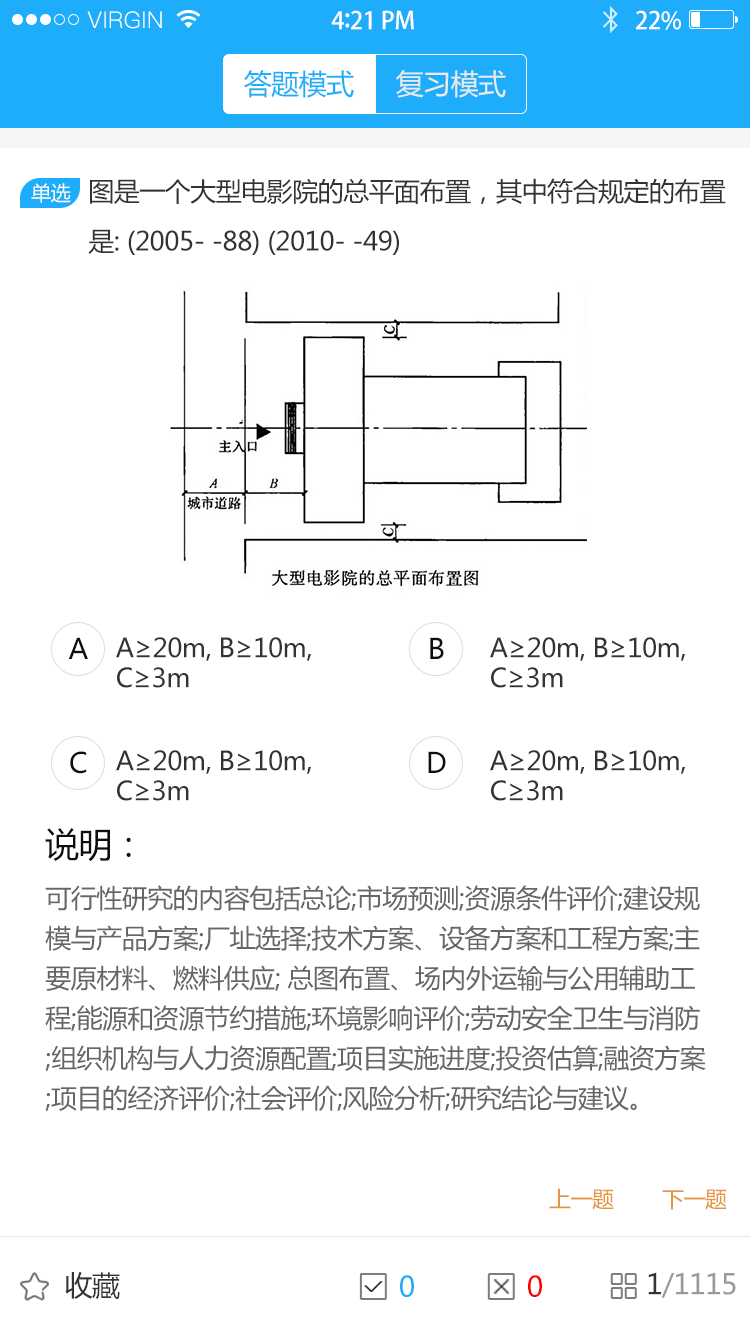
<style>
.page{position:relative;width:750px;height:1334px;background:#ffffff}
.page>*{position:absolute;margin:0}
.t1{font:23px "PingFang-SC-Regular";letter-spacing:0.02em;color:#ffffff}
.t2{font:24px "AdobeHeitiStd-Regular";letter-spacing:-0.02em;color:#ffffff}
.t3{font:26px "AdobeHeitiStd-Regular";letter-spacing:-0.02em;color:#ffffff}
.t4{font:28px "MicrosoftYaHei";letter-spacing:-0.02em;color:#1dadfa}
.t5{font:28px "MicrosoftYaHei";letter-spacing:-0.02em;color:#ebebeb}
.t6{font:20px "MicrosoftYaHei";letter-spacing:-0.02em;color:#fefefe}
.t7{font:26px/50px "MicrosoftYaHei";letter-spacing:-0.02em;color:#333333}
.t8{font:28px "MicrosoftYaHei";letter-spacing:-0.02em;color:#0e0e0e}
.t9{font:26px/30px "MicrosoftYaHei";letter-spacing:-0.02em;color:#333333}
.t10{font:34px "MicrosoftYaHei";letter-spacing:-0.02em;color:#0e0e0e}
.t11{font:26px/40px "MicrosoftYaHei";letter-spacing:-0.02em;color:#666666}
.t12{font:22px "MicrosoftYaHei";letter-spacing:-0.02em;color:#e6943e}
.t13{font:28px "MicrosoftYaHei";letter-spacing:-0.02em;color:#333333}
.t14{font:28px "MicrosoftYaHei";letter-spacing:-0.02em;color:#1dacf9}
.t15{font:28px "MicrosoftYaHei";letter-spacing:-0.02em;color:#ff0000}
.t16{font:28px "MicrosoftYaHei";letter-spacing:-0.02em;color:#999999}
</style>
<div class="page">
<p class="t1" style="left:87px;top:11px;width:75px;height:18px">VIRGIN</p>
<p class="t2" style="left:331px;top:10px;width:83px;height:20px">4<span class="t3">:</span>21 PM</p>
<p class="t2" style="left:636px;top:10px;width:45px;height:20px">22%</p>
<p class="t4" style="left:244px;top:70px;width:110px;height:28px">答题模式</p>
<p class="t5" style="left:396px;top:70px;width:110px;height:28px">复习模式</p>
<p class="t6" style="left:31px;top:183px;width:40px;height:20px">单选</p>
<p class="t7" style="left:88px;top:178px;width:638px;height:77px">图是一个大型电影院的总平面布置，其中符合规定的布置<br>是: (2005- -88) (2010- -49)</p>
<p class="t8" style="left:68px;top:637px;width:20px;height:22px">A</p>
<p class="t9" style="left:116px;top:637px;width:195px;height:51px">A≥20m, B≥10m, <br>C≥3m</p>
<p class="t8" style="left:430px;top:637px;width:14px;height:22px">B</p>
<p class="t9" style="left:490px;top:637px;width:195px;height:51px">A≥20m, B≥10m, <br>C≥3m</p>
<p class="t9" style="left:116px;top:750px;width:195px;height:51px">A≥20m, B≥10m, <br>C≥3m</p>
<p class="t9" style="left:490px;top:750px;width:195px;height:51px">A≥20m, B≥10m, <br>C≥3m</p>
<p class="t8" style="left:70px;top:751px;width:17px;height:23px">C</p>
<p class="t8" style="left:428px;top:751px;width:18px;height:22px">D</p>
<p class="t10" style="left:45px;top:828px;width:86px;height:34px">说明：</p>
<p class="t11" style="left:45px;top:885px;width:661px;height:226px">可行性研究的内容包括总论;市场预测;资源条件评价;建设规<br>模与产品方案;厂址选择;技术方案、设备方案和工程方案;主<br>要原材料、燃料供应; 总图布置、场内外运输与公用辅助工<br>程;能源和资源节约措施;环境影响评价;劳动安全卫生与消防<br>;组织机构与人力资源配置;项目实施进度;投资估算;融资方案<br>;项目的经济评价;社会评价;风险分析;研究结论与建议。</p>
<p class="t12" style="left:549px;top:1188px;width:65px;height:22px">上一题</p>
<p class="t12" style="left:662px;top:1189px;width:65px;height:21px">下一题</p>
<p class="t13" style="left:65px;top:1272px;width:55px;height:27px">收藏</p>
<p class="t14" style="left:400px;top:1275px;width:14px;height:22px">0</p>
<p class="t15" style="left:528px;top:1275px;width:14px;height:22px">0</p>
<p class="t16" style="left:648px;top:1272px;width:88px;height:26px"><span class="t13">1</span>/1115</p>
</div>
